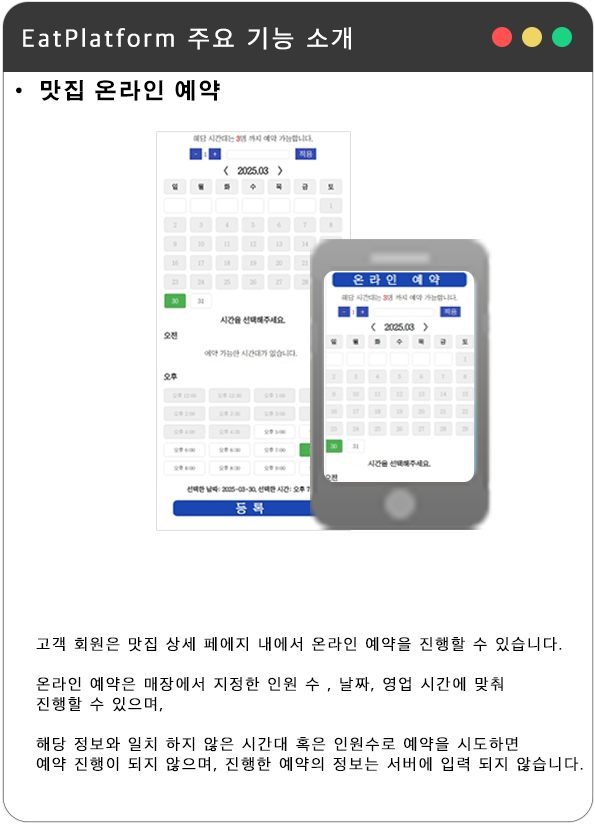
<style>
.page{position:relative;width:595px;height:825px;background:#ffffff}
.page>*{position:absolute;margin:0}
.t1{font:25px "AppleSDGothicNeoL00";letter-spacing:0.1em;color:#ffffff;font-weight:bold}
.t2{font:25px "AppleSDGothicNeoL00";letter-spacing:0.1em;color:#ffffff;font-variant:small-caps;font-weight:bold}
.t3{font:22px "AdobeGothicStd-Bold";letter-spacing:0.1em;color:#000000}
.t4{font:16px/20px "AppleSDGothicNeoL00";letter-spacing:0.1em;color:#000000;font-weight:bold}
</style>
<div class="page">
<p class="t1" style="left:23px;top:27px;width:328px;height:23px"><span class="t2">E</span>atPlatform 주요 기능 소개</p>
<p class="t3" style="left:16px;top:80px;width:204px;height:21px">· 맛집 온라인 예약</p>
<p class="t4" style="left:36px;top:637px;width:547px;height:135px">고객 회원은 맛집 상세 페에지 내에서 온라인 예약을 진행할 수 있습니다.<br><br>온라인 예약은 매장에서 지정한 인원 수 , 날짜, 영업 시간에 맞춰 <br>진행할 수 있으며,<br><br>해당 정보와 일치 하지 않은 시간대 혹은 인원수로 예약을 시도하면<br>예약 진행이 되지 않으며, 진행한 예약의 정보는 서버에 입력 되지 않습니다.</p>
</div>
